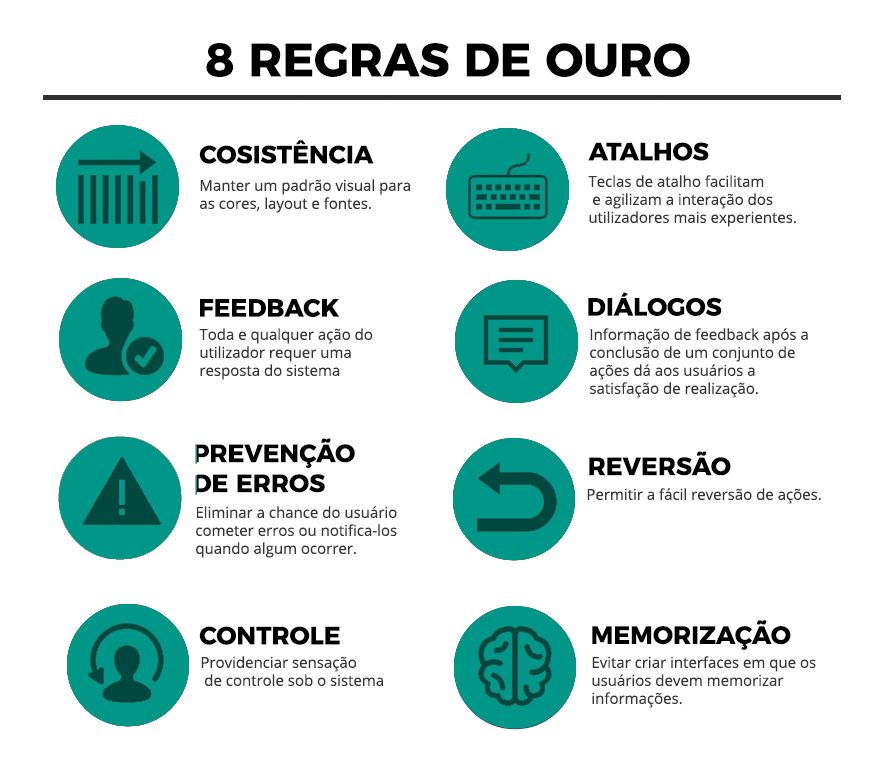
<style>
.page{position:relative;width:880px;height:765px;background:#ffffff}
.page>*{position:absolute;margin:0}
.t1{font:47px "Montserrat-Bold";color:#000000}
.t2{font:25px "Montserrat-Bold";color:#000000}
.t3{font:15px/18px "OpenSans";color:#353535}
.t4{font:15px "OpenSans";color:#353535}
</style>
<div class="page">
<p class="t1" style="left:206px;top:43px;width:484px;height:34px">8 REGRAS DE OURO</p>
<p class="t2" style="left:199px;top:140px;width:175px;height:24px">COSISTÊNCIA</p>
<p class="t2" style="left:588px;top:142px;width:121px;height:19px">ATALHOS</p>
<p class="t3" style="left:200px;top:179px;width:210px;height:34px">Manter um padrão visual para <br>as cores, layout e fontes.</p>
<p class="t3" style="left:588px;top:175px;width:208px;height:52px">Teclas de atalho facilitam<br> e agilizam a interação dos <br>utilizadores mais experientes.</p>
<p class="t2" style="left:588px;top:292px;width:134px;height:24px">DIÁLOGOS</p>
<p class="t2" style="left:200px;top:299px;width:140px;height:18px">FEEDBACK</p>
<p class="t3" style="left:199px;top:328px;width:174px;height:52px">Toda e qualquer ação do <br>utilizador requer uma <br>resposta do sistema</p>
<p class="t3" style="left:590px;top:328px;width:218px;height:70px">Informação de feedback após a <br>conclusão de um conjunto de <br>ações dá aos usuários a <br>satisfação de realização.</p>
<p class="t2" style="left:194px;top:438px;width:161px;height:55px">PREVENÇÃO<br>DE ERROS</p>
<p class="t2" style="left:589px;top:451px;width:142px;height:25px">REVERSÃO</p>
<p class="t4" style="left:587px;top:488px;width:234px;height:16px">Permitir a fácil reversão de ações.</p>
<p class="t3" style="left:196px;top:506px;width:201px;height:52px">Eliminar a chance do usuário<br>cometer erros ou notifica-los<br>quando algum ocorrer.</p>
<p class="t2" style="left:199px;top:626px;width:141px;height:19px">CONTROLE</p>
<p class="t2" style="left:592px;top:620px;width:199px;height:30px">MEMORIZAÇÃO</p>
<p class="t3" style="left:201px;top:656px;width:182px;height:30px">Providenciar sensação<br> de controle sob o sistema</p>
<p class="t3" style="left:592px;top:656px;width:224px;height:52px">Evitar criar interfaces em que os <br>usuários devem memorizar <br>informações.</p>
</div>
